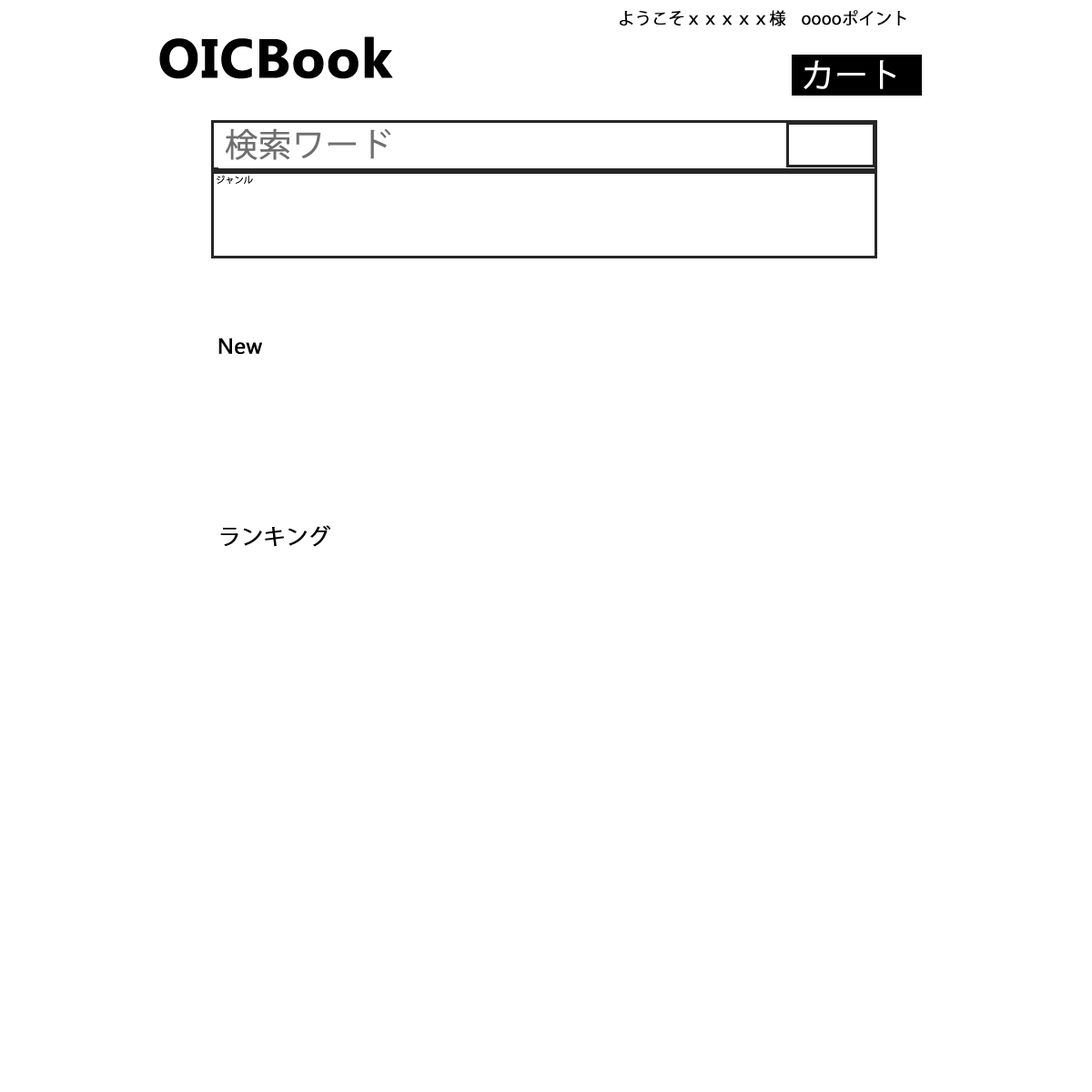
<style>
.page{position:relative;width:1092px;height:1092px;background:#ffffff}
.page>*{position:absolute;margin:0}
.t1{font:16.4px "KozGoPr6N-Regular";color:#000000;font-weight:bold}
.t2{font:54.6px "MicrosoftPhagsPa-Bold";color:#000000;font-weight:bold}
.t3{font:32.8px "KozGoPr6N-Regular";color:#ffffff;font-weight:bold}
.t4{font:32.8px "KozGoPr6N-Regular";color:#6f6f6f;font-weight:bold}
.t5{font:9.1px "KozGoPr6N-Regular";color:#000000;font-weight:bold}
.t6{font:9.1px "MicrosoftPhagsPa";color:#000000;font-weight:bold}
.t7{font:21.8px "MicrosoftPhagsPa";color:#000000;font-weight:bold}
.t8{font:21.8px "KozGoPr6N-Regular";color:#000000;font-weight:bold}
</style>
<div class="page">
<p class="t1" style="left:620px;top:10px;width:166px;height:16px">ようこそｘｘｘｘｘ様</p>
<p class="t1" style="left:802px;top:10px;width:104px;height:15px">ooooポイント</p>
<p class="t2" style="left:159px;top:36px;width:234px;height:43px">OICBook</p>
<p class="t3" style="left:804px;top:60px;width:92px;height:29px">カート</p>
<p class="t4" style="left:225px;top:128px;width:166px;height:32px">検索ワード</p>
<p class="t5" style="left:217px;top:175px;width:36px;height:9px"><span class="t6"> </span>ジャンル</p>
<p class="t7" style="left:218px;top:338px;width:44px;height:16px">New</p>
<p class="t8" style="left:220px;top:525px;width:111px;height:22px">ランキング</p>
</div>
